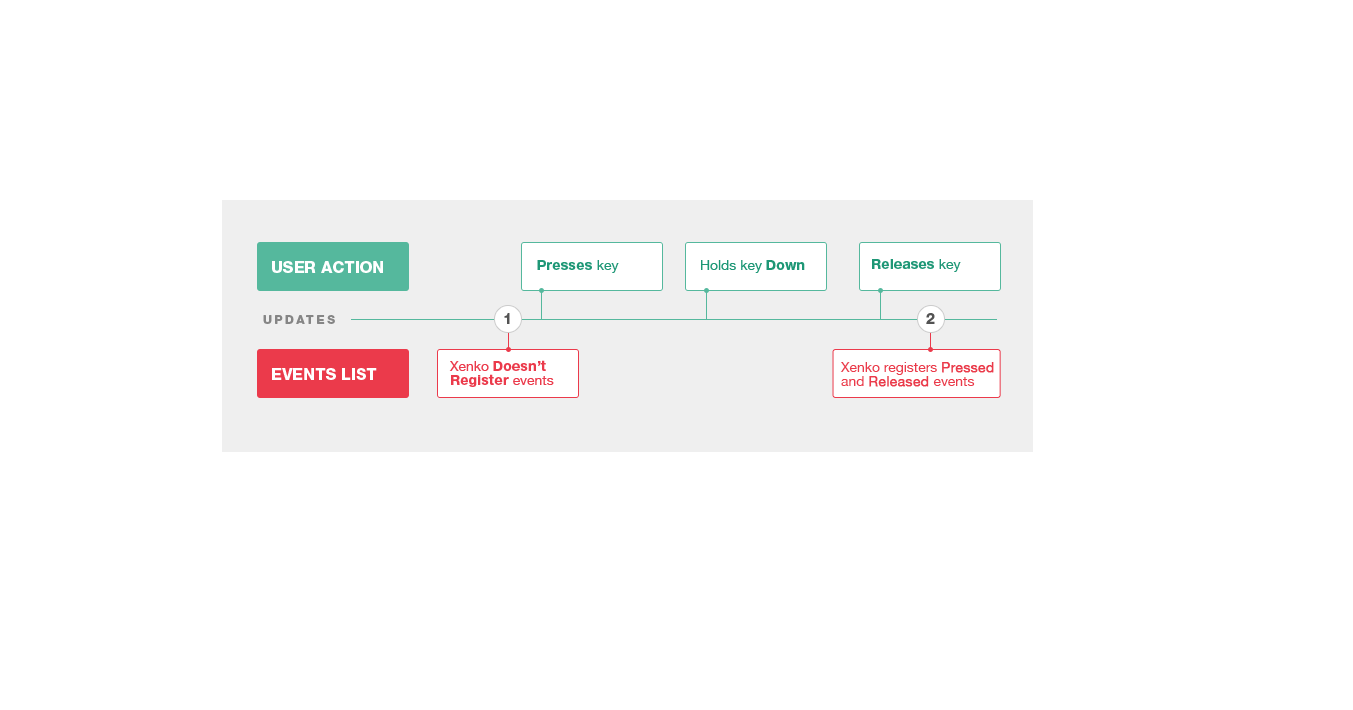
<style>
.page{position:relative;width:1353px;height:710px;background:#ffffff}
.page>*{position:absolute;margin:0}
.t1{font:16px "HelveticaNeueCyr-Black";color:#ffffff;text-transform:uppercase}
.t2{font:13.9px "HelveticaNeueCyr-Black";color:#1e9776}
.t3{font:13.9px "HelveticaNeue";color:#1e9776}
.t4{font:12px "HelveticaNeueCyr-Black";letter-spacing:0.2em;color:#858585;text-transform:uppercase}
.t5{font:15px "HelveticaNeueCyr-Black";letter-spacing:0.2em;color:#535353;text-transform:uppercase}
.t6{font:13.9px/14px "HelveticaNeueCyr-Black";color:#eb3a4b}
.t7{font:13.9px/14px "HelveticaNeue";color:#eb3a4b}
.t8{font:13.9px/14px "HelveticaNeue";color:#eb3a4b;font-weight:bold}
</style>
<div class="page">
<p class="t1" style="left:272px;top:261px;width:111px;height:12px">User Action</p>
<p class="t2" style="left:537px;top:260px;width:82px;height:13px"><span class="t3"> </span>Presses <span class="t3">key</span></p>
<p class="t3" style="left:701px;top:260px;width:104px;height:13px">Holds key <span class="t2">Down</span></p>
<p class="t2" style="left:872px;top:259px;width:89px;height:13px">Releases <span class="t3">key</span></p>
<p class="t4" style="left:263px;top:315px;width:72px;height:9px">Updates</p>
<p class="t5" style="left:504px;top:313px;width:6px;height:11px">1</p>
<p class="t5" style="left:926px;top:313px;width:9px;height:11px">2</p>
<p class="t6" style="left:449px;top:360px;width:105px;height:27px"><span class="t7">Xenko </span>Doesn’t<br>Register<span class="t7"> events</span></p>
<p class="t7" style="left:840px;top:362px;width:154px;height:25px">Xenko registers <span class="t8">Pressed <br></span>and <span class="t8">Released </span>events</p>
<p class="t1" style="left:272px;top:368px;width:105px;height:12px">Events List</p>
</div>
